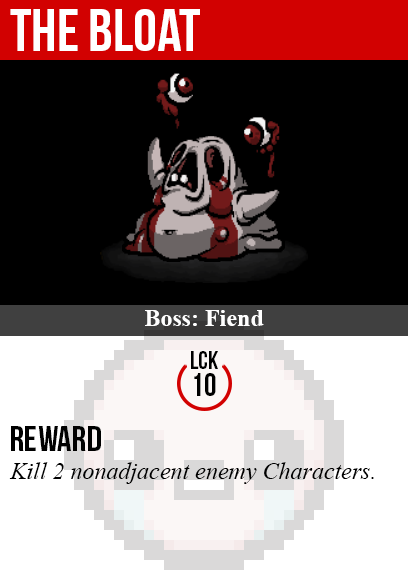
<style>
.page{position:relative;width:408px;height:585px;background:#000000}
.page>*{position:absolute;margin:0}
.t1{font:60px "BebasNeue";color:#ffffff}
.t2{font:24px "TimesNewRomanPS-BoldMT";color:#ffffff}
.t3{font:25px "BebasNeue";color:#000000}
.t4{font:32px "BebasNeue";color:#000000}
.t5{font:36px "BebasNeue";color:#000000}
.t6{font:24px "TimesNewRomanPS-ItalicMT";color:#000000}
</style>
<div class="page">
<p class="t1" style="left:10px;top:9px;width:190px;height:42px">the bloat</p>
<p class="t2" style="left:145px;top:310px;width:119px;height:16px">Boss: Fiend</p>
<p class="t3" style="left:191px;top:351px;width:27px;height:18px">lck</p>
<p class="t4" style="left:194px;top:373px;width:22px;height:23px">10</p>
<p class="t5" style="left:11px;top:426px;width:90px;height:25px">reward</p>
<p class="t6" style="left:9px;top:462px;width:365px;height:22px">Kill 2 nonadjacent enemy Characters.</p>
</div>
